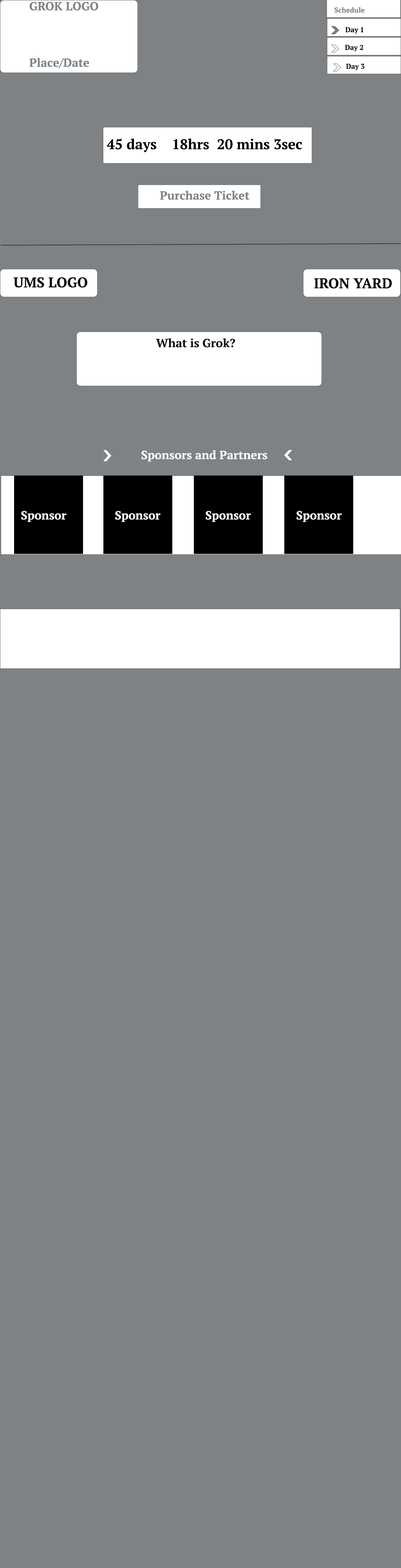
<style>
.page{position:relative;width:401px;height:1568px;background:#7e8285}
.page>*{position:absolute;margin:0}
.t1{font:11.8px/7.1px "PTSerif-Bold";color:#7e8285}
.t2{font:7.1px "PTSerif-Bold";color:#7e8285}
.t3{font:7.1px "PTSerif-Bold";color:#000000}
.t4{font:7.1px "PTSerif-Bold";color:#070707}
.t5{font:14.1px "PTSerif-Bold";color:#000000}
.t6{font:11.8px "PTSerif-Bold";color:#7e8285}
.t7{font:14.1px "PTSerif-Bold";color:#070707}
.t8{font:14.1px "PTSerif-Bold";color:#050505}
.t9{font:11.8px "PTSerif-Bold";color:#070707}
.t10{font:11.8px "PTSerif-Bold";color:#ffffff}
</style>
<div class="page">
<p class="t1" style="left:29px;top:2px;width:69px;height:67px">GROK LOGO<br><br><br><br><br><br><br><br>Place/Date</p>
<p class="t2" style="left:335px;top:7px;width:30px;height:6px">Schedule</p>
<p class="t3" style="left:346px;top:27px;width:18px;height:7px">Day 1</p>
<p class="t4" style="left:345px;top:45px;width:19px;height:7px">Day 2</p>
<p class="t4" style="left:346px;top:64px;width:19px;height:7px">Day 3</p>
<p class="t5" style="left:107px;top:138px;width:196px;height:14px">45 days    18hrs  20 mins 3sec</p>
<p class="t6" style="left:160px;top:191px;width:90px;height:9px">Purchase Ticket</p>
<p class="t7" style="left:13px;top:277px;width:74px;height:11px">UMS LOGO</p>
<p class="t8" style="left:314px;top:278px;width:78px;height:11px">IRON YARD</p>
<p class="t9" style="left:156px;top:338px;width:80px;height:10px">What is Grok?</p>
<p class="t10" style="left:142px;top:450px;width:126px;height:12px">Sponsors and Partners</p>
<p class="t10" style="left:21px;top:511px;width:46px;height:11px">Sponsor</p>
<p class="t10" style="left:115px;top:511px;width:46px;height:11px">Sponsor</p>
<p class="t10" style="left:206px;top:511px;width:45px;height:11px">Sponsor</p>
<p class="t10" style="left:297px;top:511px;width:45px;height:11px">Sponsor</p>
</div>
